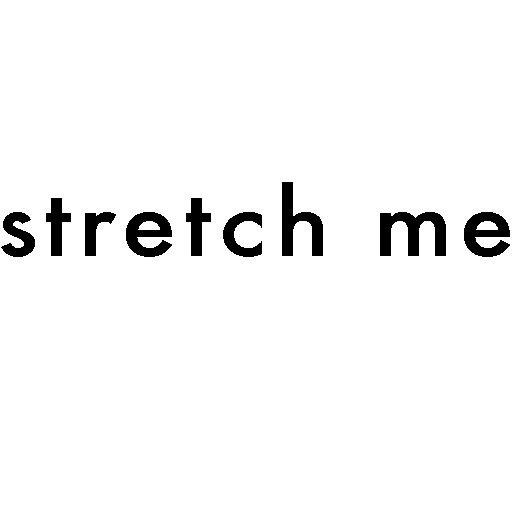
<style>
.page{position:relative;width:512px;height:512px;background:#ffffff}
.page>*{position:absolute;margin:0}
.t1{font:89.9px "Futura-Medium";letter-spacing:0.06em;color:#000000;scale:1.12 1}
</style>
<div class="page">
<p class="t1" style="left:1px;top:182px;width:509px;height:75px">stretch me</p>
</div>
